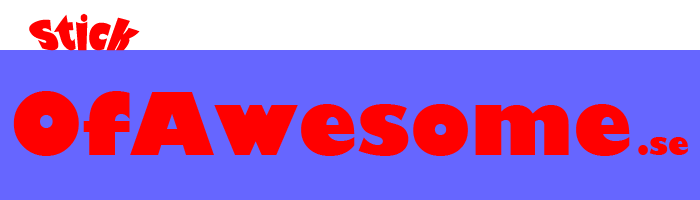
<style>
.page{position:relative;width:700px;height:200px;background:#6666ff}
.page>*{position:absolute;margin:0}
.t1{font:30px "GillSans-UltraBold";color:#ff0000}
.t2{font:85px "GillSans-UltraBold";color:#ff0000}
</style>
<div class="page">
<p class="t1" style="left:29px;top:13px;width:111px;height:38px">Stick</p>
<p class="t2" style="left:13px;top:91px;width:617px;height:65px">OfAwesome</p>
<p class="t1" style="left:638px;top:137px;width:50px;height:18px">.se</p>
</div>
